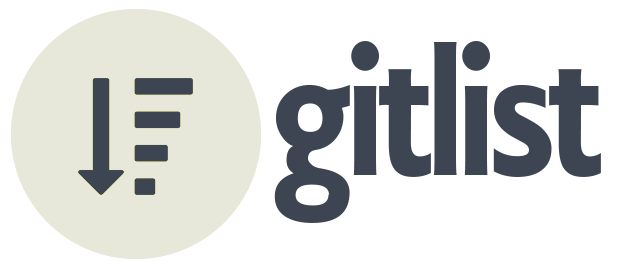
<style>
.page{position:relative;width:622px;height:278px;background:#ffffff}
.page>*{position:absolute;margin:0}
.t1{font:200px "Collegiate";letter-spacing:-0.025em;color:#3d4452}
</style>
<div class="page">
<p class="t1" style="left:274px;top:41px;width:327px;height:182px">gitlist</p>
</div>
